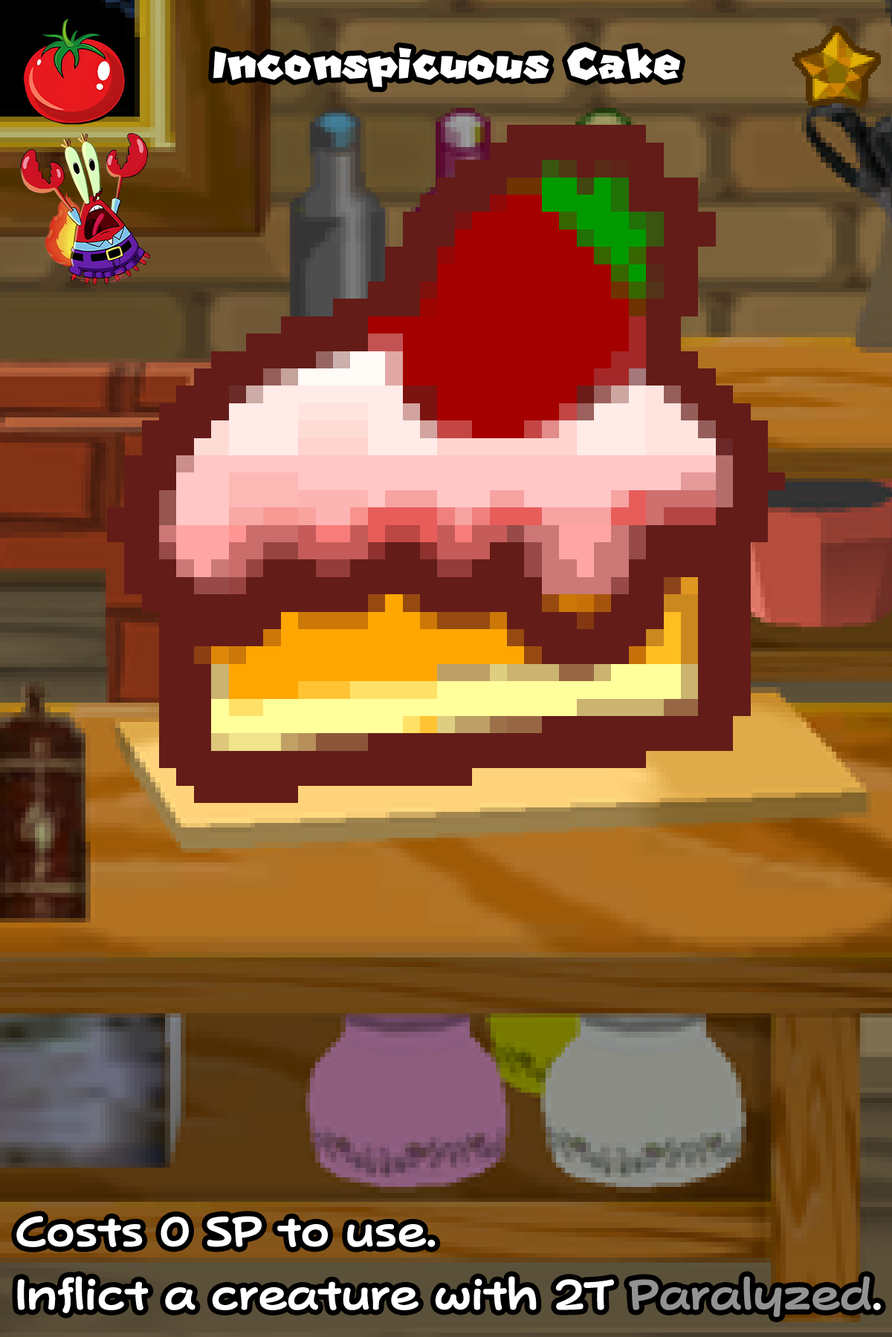
<style>
.page{position:relative;width:892px;height:1337px}
.page>*{position:absolute;margin:0}
.t1{font:101px "SuperMario";color:#ffffff}
.t2{font:72.8px/63.2px "PopJoyStd-B";color:#ffffff}
.t3{font:72.8px/63.2px "PopJoyStd-B";color:#939393}
</style>
<div class="page">
<p class="t1" style="left:213px;top:47px;width:467px;height:40px">Inconspicuous Cake</p>
<p class="t2" style="left:16px;top:1216px;width:864px;height:101px">Costs 0 SP to use.<br>Inflict a creature with 2T <span class="t3">Paralyzed</span>.</p>
</div>
